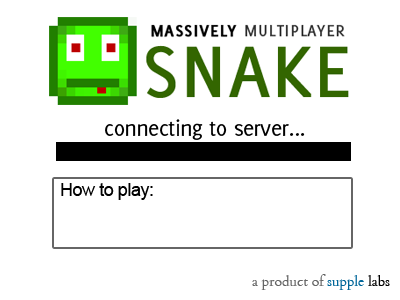
<style>
.page{position:relative;width:400px;height:300px;background:#ffffff}
.page>*{position:absolute;margin:0}
.t1{font:24px "Delicious-Roman";letter-spacing:-0.025em;color:#000000}
.t2{font:24px "Delicious-SmallCaps";letter-spacing:-0.025em;color:#000000}
.t3{font:18px "ArialMT";letter-spacing:-0.025em;color:#000000}
.t4{font:14px "Cardo";color:#666666}
.t5{font:14px "Cardo";color:#006699}
.t6{font:14px "Cardo";color:#000000}
</style>
<div class="page">
<p class="t1" style="left:105px;top:119px;width:200px;height:21px">connecting to server..<span class="t2">.</span></p>
<p class="t3" style="left:61px;top:183px;width:92px;height:17px">How to play:</p>
<p class="t4" style="left:252px;top:274px;width:138px;height:16px">a product of <span class="t5">supple</span><span class="t6"> labs</span></p>
</div>
